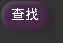
<style>
.page{position:relative;width:63px;height:43px;background:#333333}
.page>*{position:absolute;margin:0}
.t1{font:14px "SimHei";color:#fefbfe}
</style>
<div class="page">
<p class="t1" style="left:12px;top:8px;width:26px;height:12px">查找</p>
</div>
